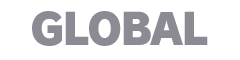
<style>
.page{position:relative;width:240px;height:60px;background:#ffffff}
.page>*{position:absolute;margin:0}
.t1{font:42.7px "RodinPro-UB";letter-spacing:-0.053em;color:#8c8b93}
</style>
<div class="page">
<p class="t1" style="left:32px;top:11px;width:176px;height:35px">GLOBAL</p>
</div>
